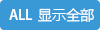
<style>
.page{position:relative;width:100px;height:30px;background:#3998d6}
.page>*{position:absolute;margin:0}
.t1{font:14px "AdobeHeitiStd-Regular";color:#ffffff}
.t2{font:14px "MicrosoftYaHei";color:#ffffff}
</style>
<div class="page">
<p class="t1" style="left:9px;top:9px;width:24px;height:11px">ALL</p>
<p class="t2" style="left:38px;top:8px;width:56px;height:14px">显示全部</p>
</div>
